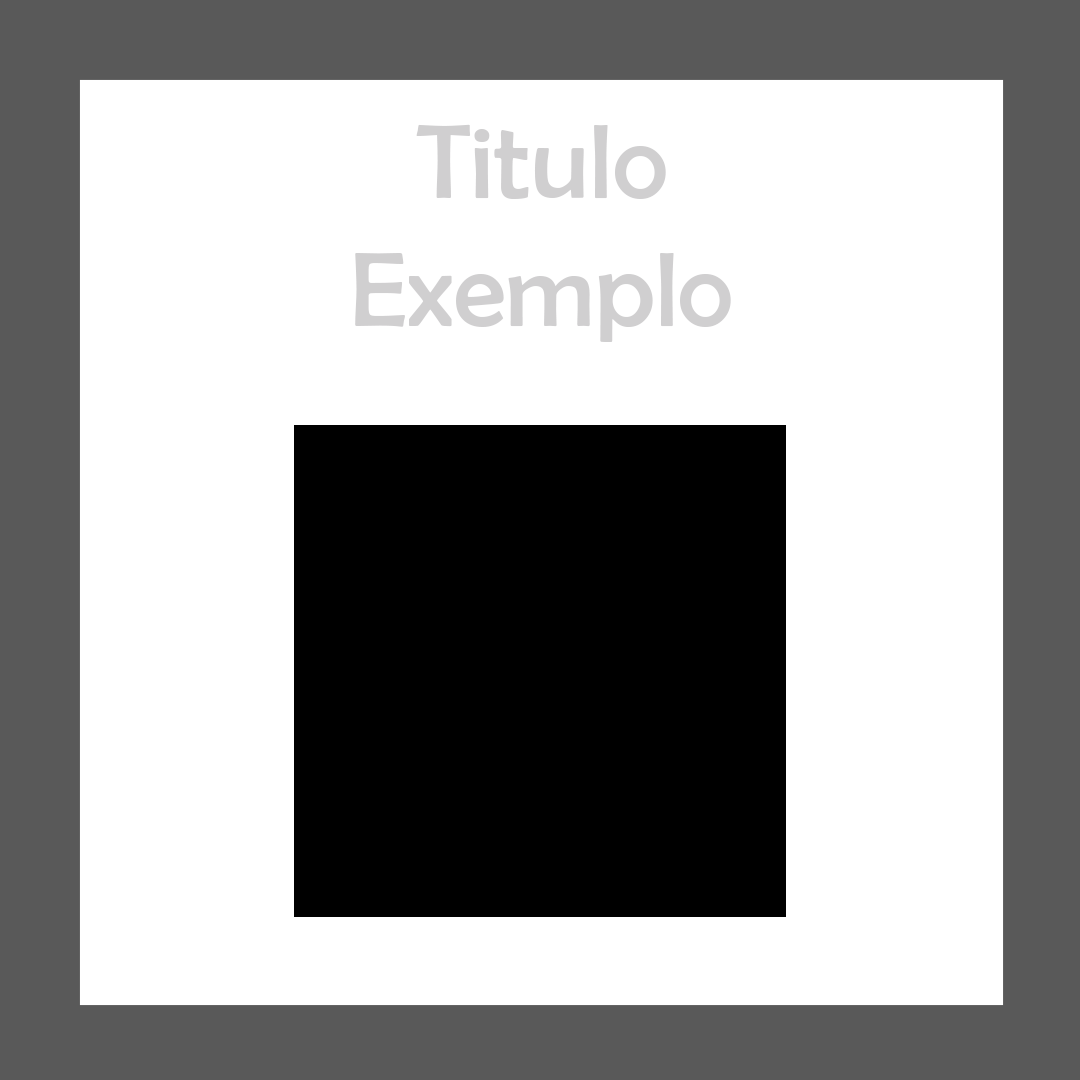
<style>
.page{position:relative;width:1080px;height:1080px;background:#ffffff}
.page>*{position:absolute;margin:0}
.t1{font:106.7px "BerlinSansFB-Reg";color:#d0cfd0}
</style>
<div class="page">
<p class="t1" style="left:355px;top:124px;width:376px;height:218px;text-align:center">Titulo Exemplo</p>
</div>
